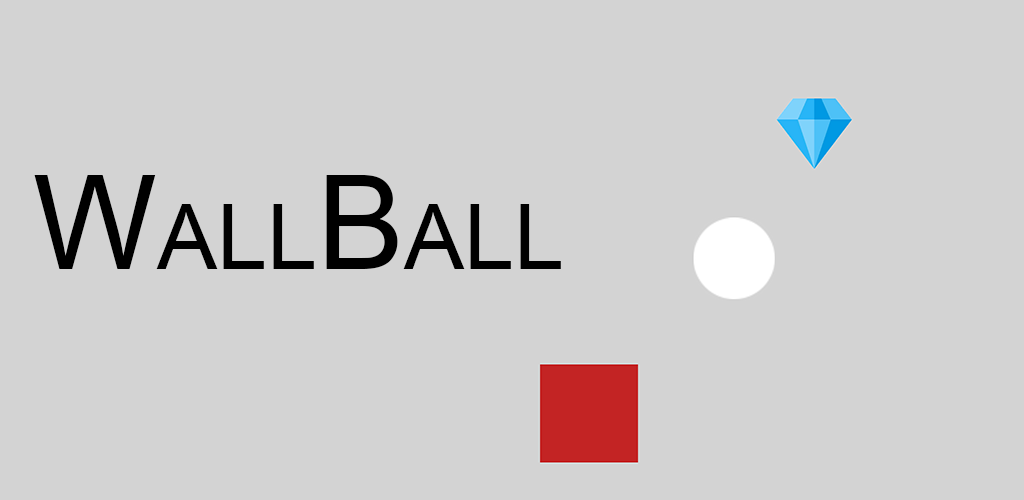
<style>
.page{position:relative;width:1024px;height:500px;background:#d3d3d3}
.page>*{position:absolute;margin:0}
.t1{font:90px "ArialMT";color:#000000}
.t2{font:131px "ArialMT";color:#000000}
</style>
<div class="page">
<p class="t1" style="left:34px;top:175px;width:527px;height:94px"><span class="t2">W</span>ALL<span class="t2">B</span>ALL</p>
</div>
